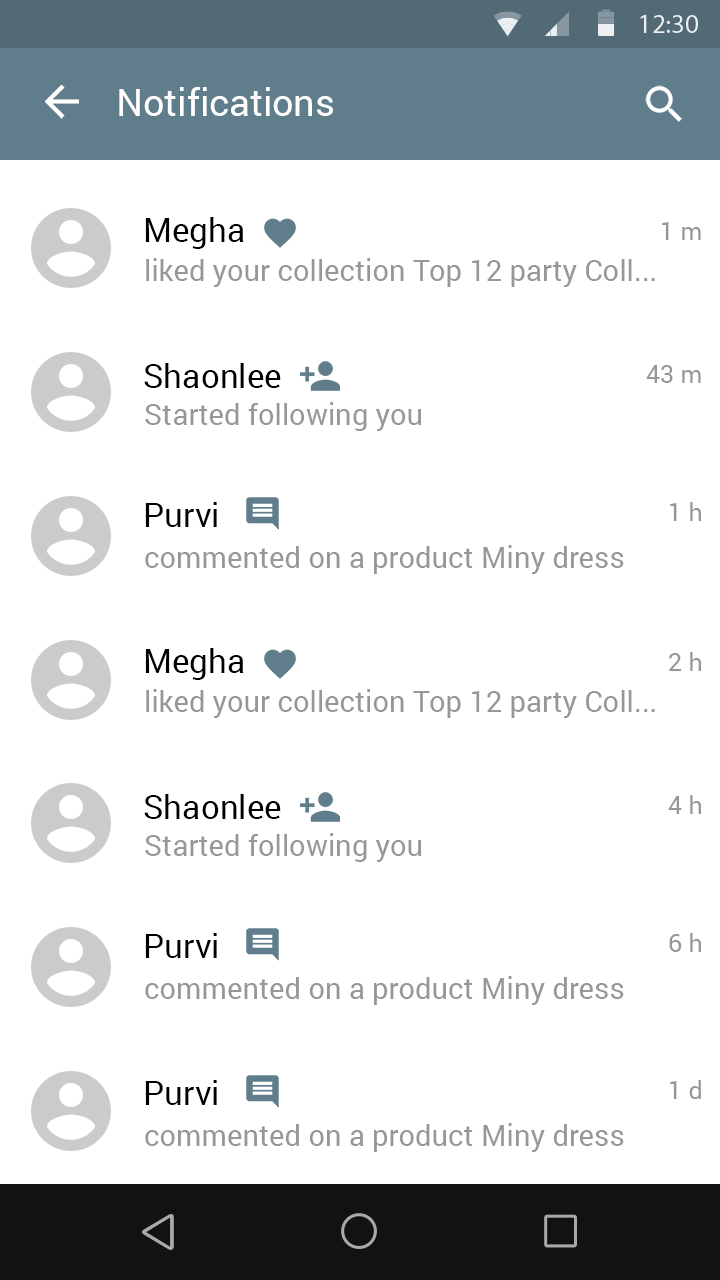
<style>
.page{position:relative;width:720px;height:1280px;background:#ffffff}
.page>*{position:absolute;margin:0}
.t1{font:37.5px "Roboto-Regular";color:#fefefe}
.t2{font:33.3px "Roboto-Regular";color:#000000}
.t3{font:25px "Roboto-Regular";color:#979797}
.t4{font:29.2px "Roboto-Regular";color:#979797}
</style>
<div class="page">
<p class="t1" style="left:119px;top:87px;width:214px;height:29px">Notifications</p>
<p class="t2" style="left:145px;top:217px;width:99px;height:32px">Megha</p>
<p class="t3" style="left:662px;top:222px;width:39px;height:18px">1 m</p>
<p class="t4" style="left:146px;top:258px;width:509px;height:29px">liked your collection Top 12 party Coll...</p>
<p class="t2" style="left:144px;top:363px;width:137px;height:25px">Shaonlee</p>
<p class="t3" style="left:646px;top:365px;width:55px;height:18px">43 m</p>
<p class="t4" style="left:145px;top:402px;width:276px;height:29px">Started following you</p>
<p class="t2" style="left:145px;top:502px;width:72px;height:25px">Purvi</p>
<p class="t3" style="left:670px;top:502px;width:31px;height:19px">1 h</p>
<p class="t4" style="left:145px;top:545px;width:479px;height:29px">commented on a product Miny dress</p>
<p class="t2" style="left:145px;top:648px;width:99px;height:32px">Megha</p>
<p class="t3" style="left:669px;top:652px;width:32px;height:19px">2 h</p>
<p class="t4" style="left:146px;top:689px;width:509px;height:29px">liked your collection Top 12 party Coll...</p>
<p class="t2" style="left:144px;top:794px;width:137px;height:25px">Shaonlee</p>
<p class="t3" style="left:668px;top:795px;width:33px;height:19px">4 h</p>
<p class="t4" style="left:145px;top:833px;width:276px;height:29px">Started following you</p>
<p class="t2" style="left:145px;top:933px;width:72px;height:25px">Purvi</p>
<p class="t3" style="left:669px;top:933px;width:32px;height:19px">6 h</p>
<p class="t4" style="left:145px;top:976px;width:479px;height:29px">commented on a product Miny dress</p>
<p class="t2" style="left:145px;top:1080px;width:72px;height:25px">Purvi</p>
<p class="t3" style="left:670px;top:1080px;width:31px;height:19px">1 d</p>
<p class="t4" style="left:145px;top:1123px;width:479px;height:29px">commented on a product Miny dress</p>
</div>
